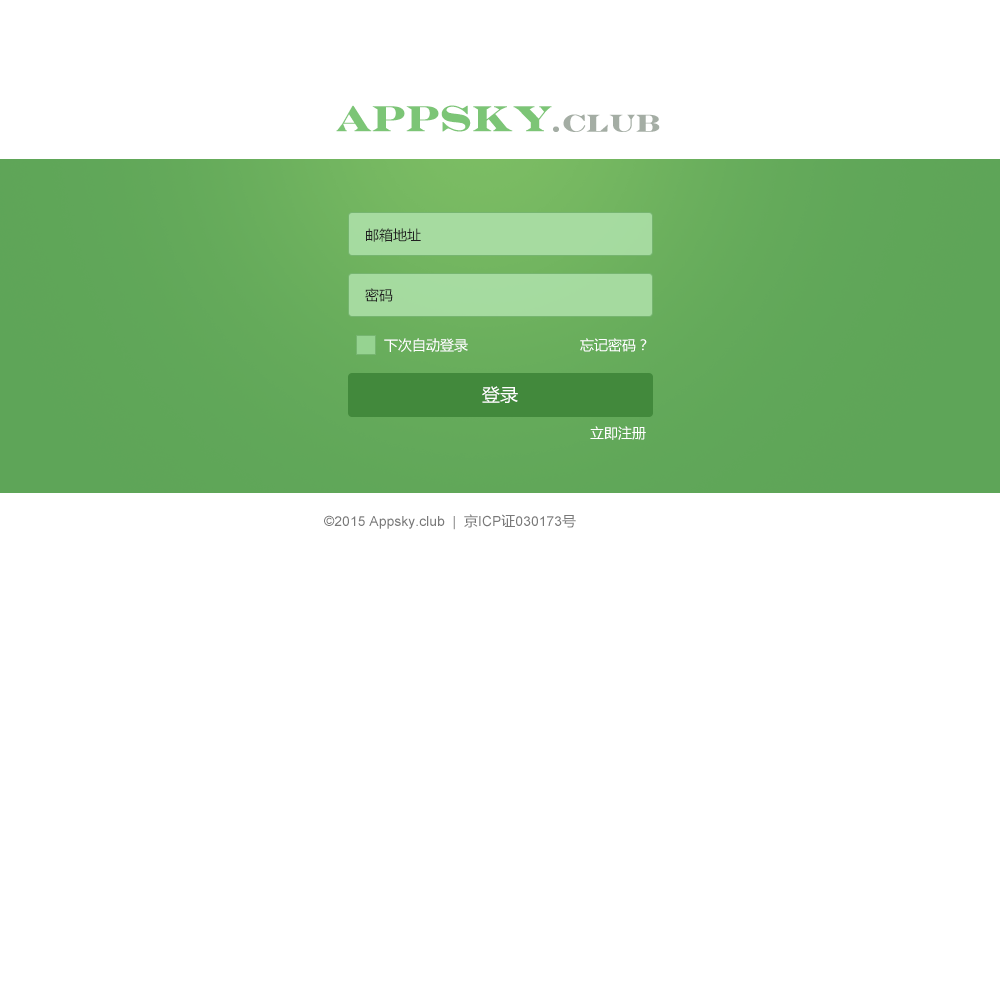
<style>
.page{position:relative;width:1000px;height:1000px;background:#ffffff}
.page>*{position:absolute;margin:0}
.t1{font:36px "EngraversMT-Bold";color:#7cc576;font-weight:bold}
.t2{font:24.4px "EngraversMT-Bold";color:#a4ada4;font-weight:bold}
.t3{font:14px "MicrosoftYaHei";color:#212121}
.t4{font:14px "MicrosoftYaHei";color:#ffffff}
.t5{font:18px "MicrosoftYaHei";color:#ffffff}
.t6{font:14px "ArialMT";color:#797979}
.t7{font:14px "MicrosoftYaHei";color:#797979}
</style>
<div class="page">
<p class="t1" style="left:336px;top:105px;width:216px;height:27px">APPSky</p>
<p class="t2" style="left:553px;top:114px;width:107px;height:18px">.CLUB</p>
<p class="t3" style="left:366px;top:228px;width:55px;height:14px">邮箱地址</p>
<p class="t3" style="left:365px;top:288px;width:28px;height:14px">密码</p>
<p class="t4" style="left:384px;top:338px;width:84px;height:14px">下次自动登录</p>
<p class="t4" style="left:580px;top:338px;width:67px;height:14px">忘记密码？</p>
<p class="t5" style="left:482px;top:386px;width:36px;height:17px">登录</p>
<p class="t4" style="left:590px;top:426px;width:56px;height:14px">立即注册</p>
<p class="t6" style="left:324px;top:514px;width:252px;height:16px">©2015 Appsky.club  |  <span class="t7">京</span>ICP<span class="t7">证</span>030173<span class="t7">号</span></p>
</div>
